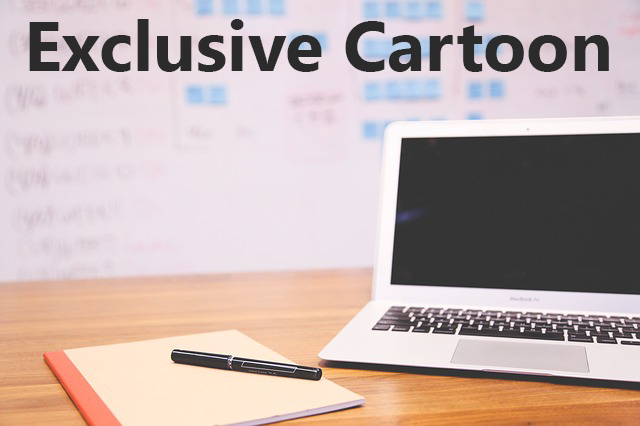
<style>
.page{position:relative;width:640px;height:426px}
.page>*{position:absolute;margin:0}
.t1{font:70.2px "SegoeUI-Bold";color:#2b2b2b}
</style>
<div class="page">
<p class="t1" style="left:29px;top:19px;width:580px;height:53px">Exclusive Cartoon</p>
</div>
